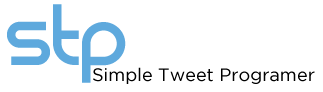
<style>
.page{position:relative;width:323px;height:92px;background:#ffffff}
.page>*{position:absolute;margin:0}
.t1{font:96.7px "REZ";color:#5ea9dd}
.t2{font:18px "GothamBook";color:#000000}
</style>
<div class="page">
<p class="t1" style="left:7px;top:4px;width:119px;height:79px">Stp</p>
<p class="t2" style="left:93px;top:67px;width:222px;height:17px">Simple Tweet Programer</p>
</div>
